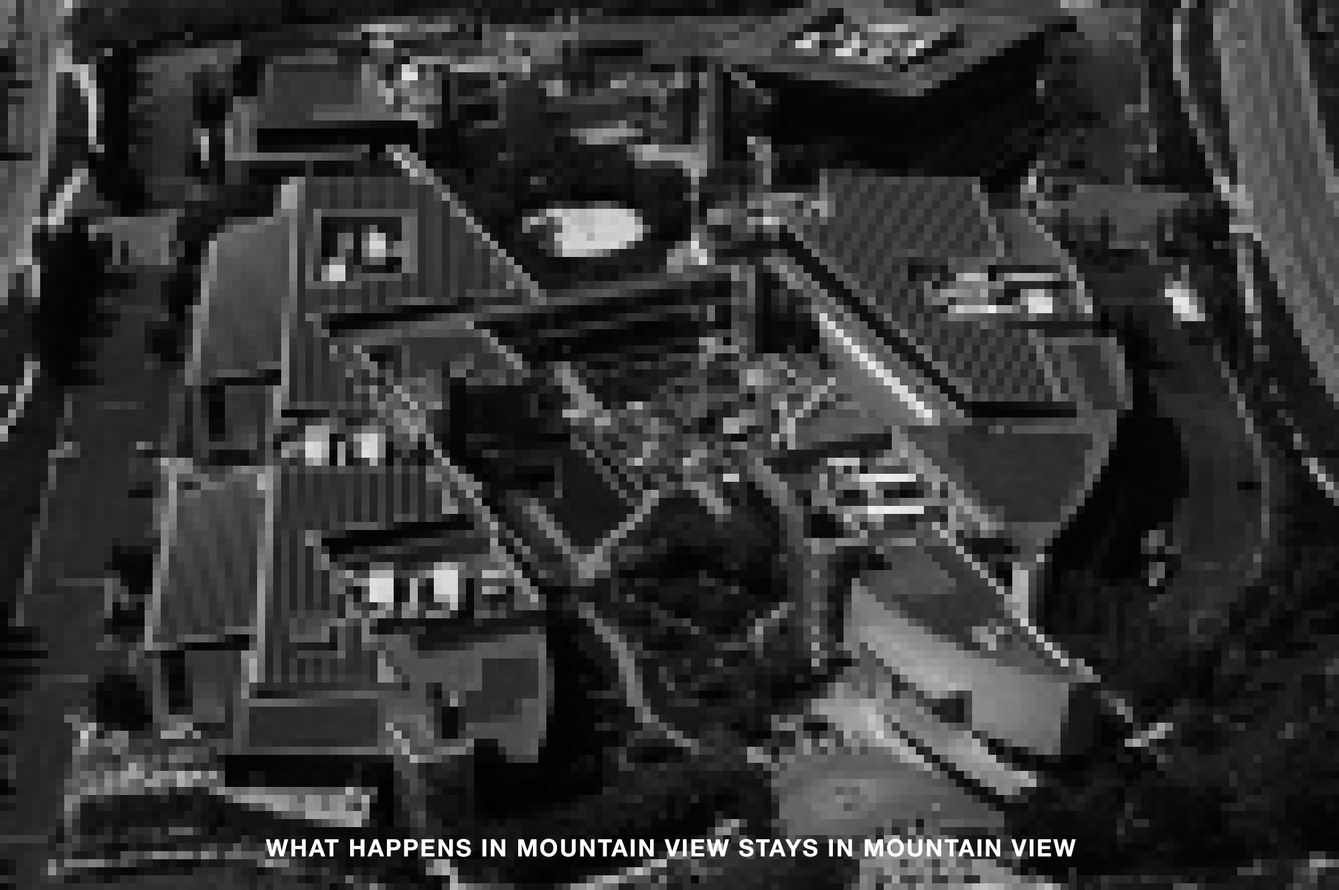
<style>
.page{position:relative;width:1339px;height:890px}
.page>*{position:absolute;margin:0}
.t1{font:24px "HelveticaNeue-Bold";letter-spacing:0.06em;color:#ffffff}
</style>
<div class="page">
<p class="t1" style="left:266px;top:839px;width:810px;height:19px">WHAT HAPPENS IN MOUNTAIN VIEW STAYS IN MOUNTAIN VIEW</p>
</div>
